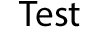
<style>
.page{position:relative;width:100px;height:50px;background:#ffffff}
.page>*{position:absolute;margin:0}
.t1{font:37px "MyriadPro-Regular";color:#000000}
</style>
<div class="page">
<p class="t1" style="left:19px;top:1px;width:61px;height:26px">Test</p>
</div>
